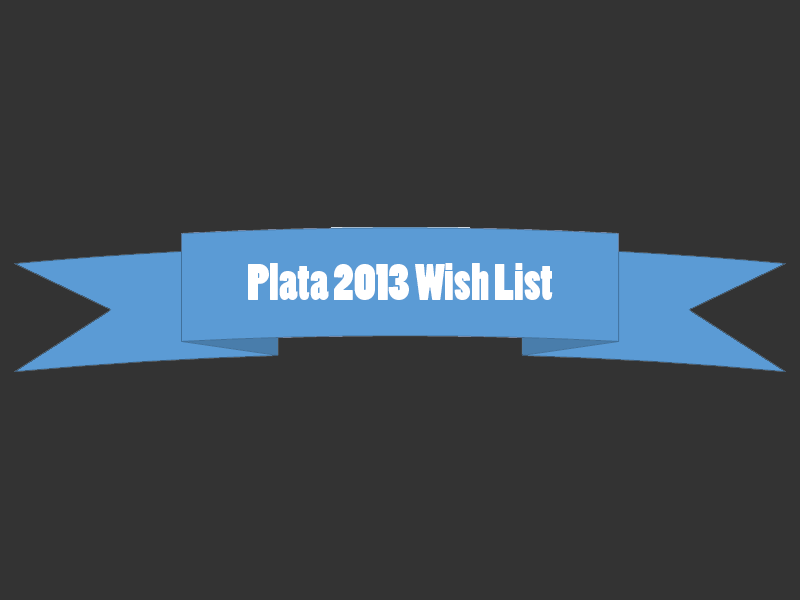
<style>
.page{position:relative;width:800px;height:600px;background:#333333}
.page>*{position:absolute;margin:0}
.t1{font:48px "PoplarStd";color:#ffffff}
</style>
<div class="page">
<p class="t1" style="left:248px;top:263px;width:305px;height:37px">Plata 2013 Wish List</p>
</div>
